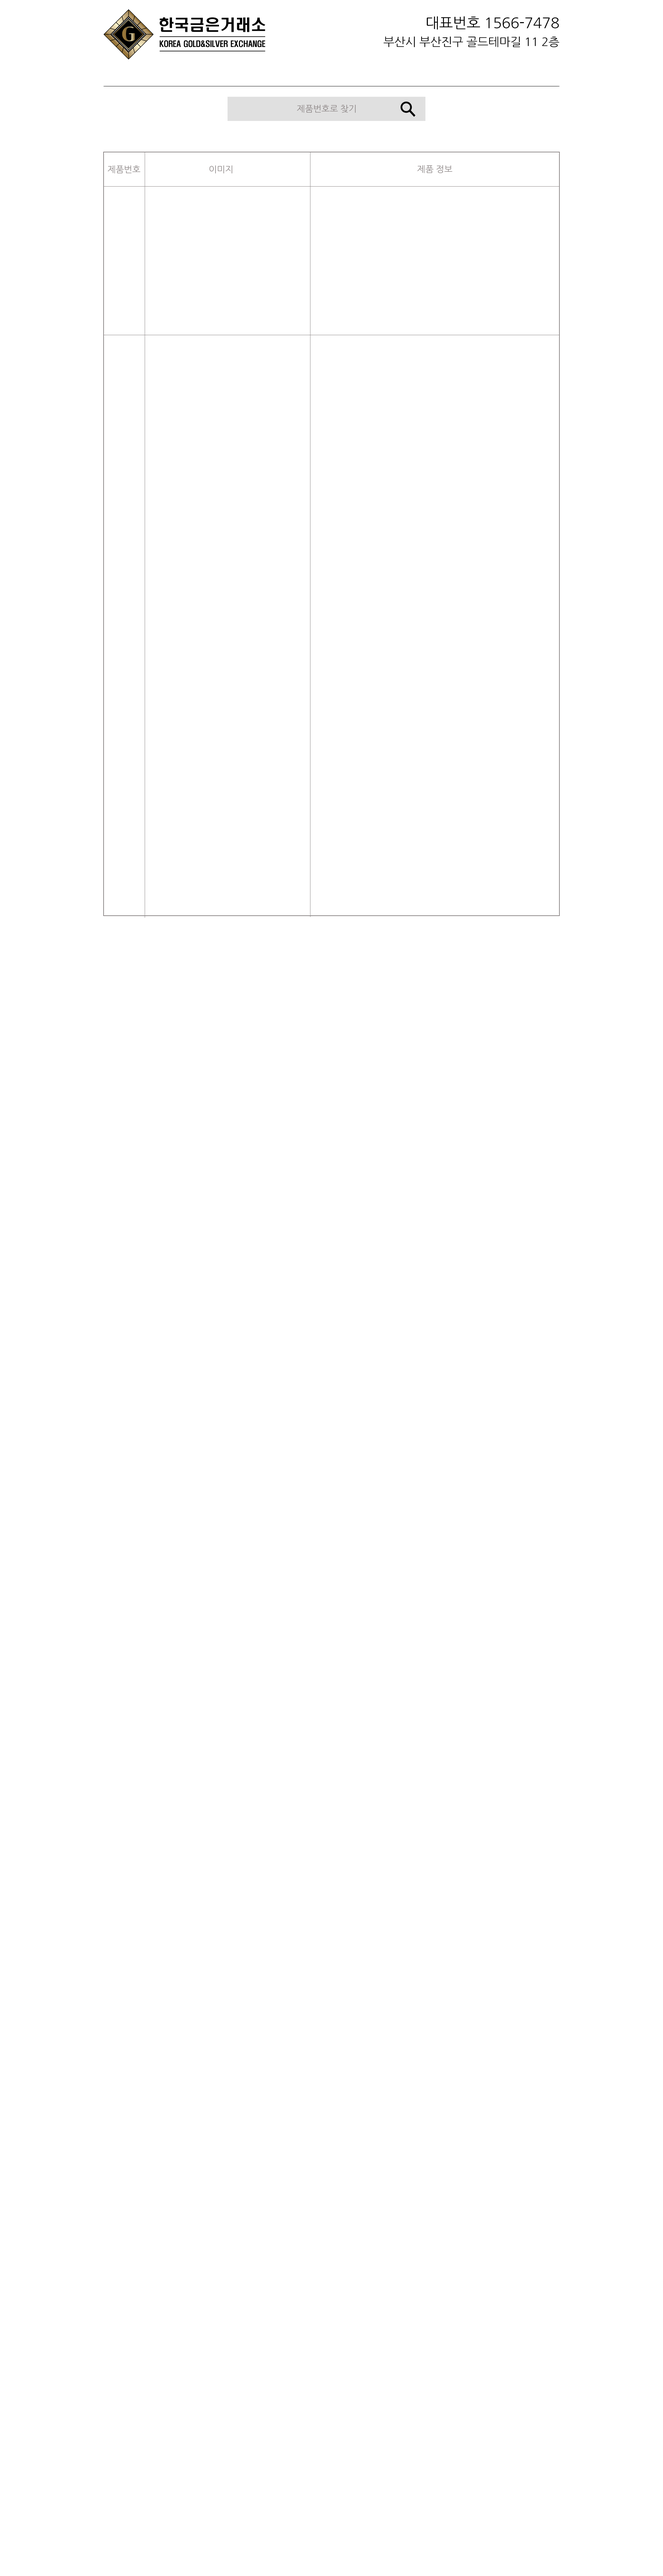
<style>
.page{position:relative;width:663px;height:2576px;background:#ffffff}
.page>*{position:absolute;margin:0}
.t1{font:14.4px "NanumGothicOTF";letter-spacing:-0.015em;color:#000000;scale:1.03 1}
.t2{font:11.5px "NanumGothicOTF";letter-spacing:-0.015em;color:#000000;scale:1.03 1}
.t3{font:8.6px "NanumGothicOTF";letter-spacing:-0.015em;color:#8b8484;scale:1.03 1}
</style>
<div class="page">
<p class="t1" style="left:427px;top:16px;width:132px;height:14px">대표번호 1566-7478</p>
<p class="t2" style="left:384px;top:36px;width:176px;height:11px">부산시 부산진구 골드테마길 11 2층</p>
<p class="t3" style="left:297px;top:105px;width:59px;height:8px">제품번호로 찾기</p>
<p class="t3" style="left:108px;top:165px;width:33px;height:8px">제품번호</p>
<p class="t3" style="left:209px;top:165px;width:24px;height:8px">이미지</p>
<p class="t3" style="left:417px;top:165px;width:36px;height:8px">제품 정보</p>
</div>
